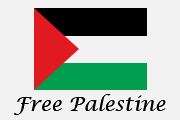
<style>
.page{position:relative;width:180px;height:120px;background:#f2f2f2}
.page>*{position:absolute;margin:0}
.t1{font:20px "LucidaCalligraphy-Italic";color:#000000}
</style>
<div class="page">
<p class="t1" style="left:13px;top:94px;width:153px;height:21px">Free Palestine</p>
<p class="t1" style="left:13px;top:94px;width:153px;height:21px">Free Palestine</p>
</div>
